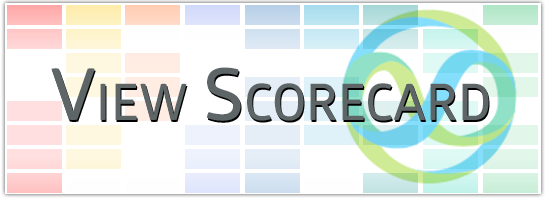
<style>
.page{position:relative;width:546px;height:199px;background:#ffffff}
.page>*{position:absolute;margin:0}
.t1{font:72px "GloberSemiBoldFree";color:#5d6567;font-variant:small-caps}
</style>
<div class="page">
<p class="t1" style="left:51px;top:67px;width:438px;height:54px">View Scorecard</p>
</div>
